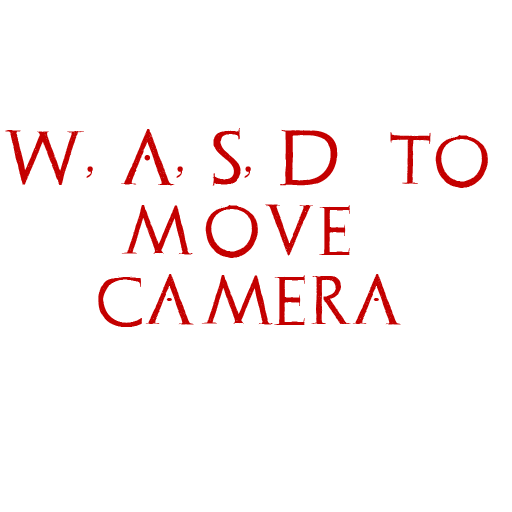
<style>
.page{position:relative;width:512px;height:512px;background:#ffffff}
.page>*{position:absolute;margin:0}
.t1{font:58.3px "Archeologicaps";color:#c40000}
</style>
<div class="page">
<p class="t1" style="left:5px;top:128px;width:483px;height:199px;text-align:center">W, A, S, D  to<br>move <br>camera</p>
</div>
